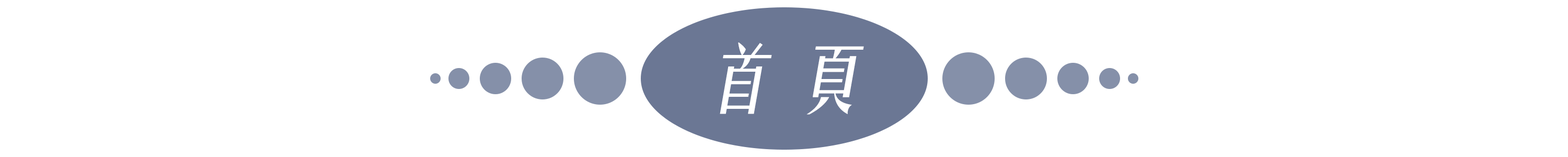
<style>
.page{position:relative;width:1568px;height:157px;background:#ffffff}
.page>*{position:absolute;margin:0}
.t1{font:73.2px "FZYTK--GBK1-0";color:#ffffff;font-style:italic}
</style>
<div class="page">
<p class="t1" style="left:720px;top:42px;width:144px;height:72px">首 頁</p>
</div>
